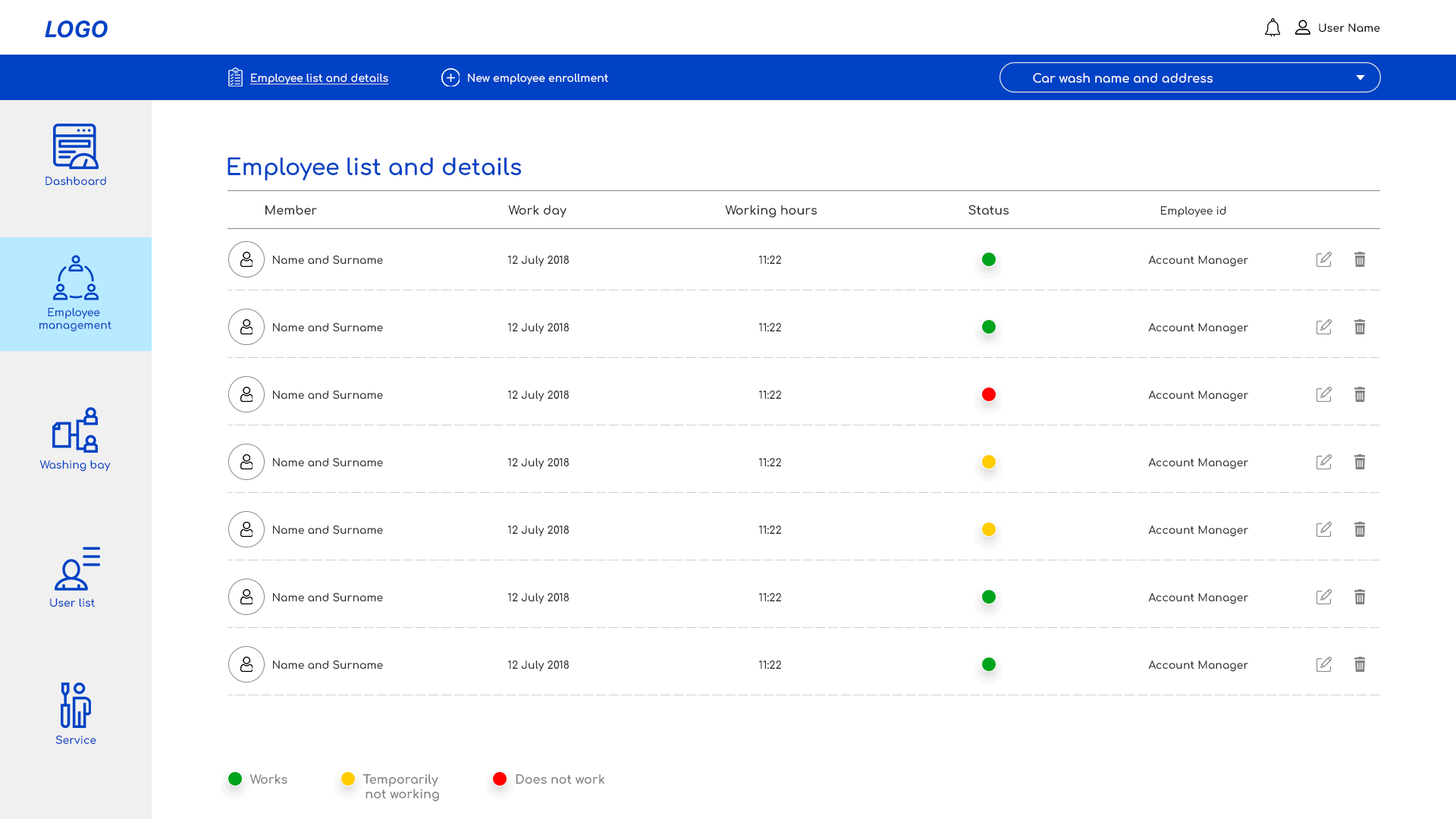
<style>
.page{position:relative;width:1456px;height:819px;background:#ffffff}
.page>*{position:absolute;margin:0}
.t1{font:22.7px "AktivGrotesk-BoldItalic";color:#0042c5}
.t2{font:10.6px "Comfortaa-Bold";color:#010101}
.t3{font:10.6px "Comfortaa-Bold";color:#ffffff;text-decoration:underline}
.t4{font:10.6px "Comfortaa-Bold";color:#ffffff}
.t5{font:12.1px "Comfortaa-Bold";color:#ffffff}
.t6{font:22.7px "Comfortaa-Bold";color:#0042c5}
.t7{font:10.6px "Comfortaa-Bold";color:#0042c5}
.t8{font:12.1px "Comfortaa-Bold";color:#303030}
.t9{font:10.6px "Comfortaa-Bold";color:#303030}
.t10{font:12.1px "Comfortaa-Bold";color:#7e7e7e}
</style>
<div class="page">
<p class="t1" style="left:45px;top:20px;width:63px;height:18px">LOGO</p>
<p class="t2" style="left:1319px;top:24px;width:61px;height:9px">User Name</p>
<p class="t3" style="left:249px;top:74px;width:140px;height:11px">Employee list and details</p>
<p class="t4" style="left:468px;top:74px;width:140px;height:11px">New employee enrollment</p>
<p class="t5" style="left:1033px;top:73px;width:180px;height:10px">Car wash name and address</p>
<p class="t6" style="left:227px;top:157px;width:294px;height:23px">Employee list and details</p>
<p class="t7" style="left:45px;top:177px;width:61px;height:8px">Dashboard</p>
<p class="t8" style="left:265px;top:205px;width:52px;height:10px">Member</p>
<p class="t8" style="left:508px;top:205px;width:58px;height:13px">Work day</p>
<p class="t8" style="left:725px;top:205px;width:92px;height:13px">Working hours</p>
<p class="t8" style="left:968px;top:205px;width:41px;height:10px">Status</p>
<p class="t9" style="left:1161px;top:206px;width:65px;height:12px">Employee id</p>
<p class="t9" style="left:273px;top:255px;width:110px;height:10px">Name and Surname</p>
<p class="t9" style="left:508px;top:255px;width:61px;height:12px">12 July 2018</p>
<p class="t9" style="left:759px;top:256px;width:22px;height:9px">11:22</p>
<p class="t9" style="left:1148px;top:256px;width:100px;height:11px">Account Manager</p>
<p class="t7" style="left:39px;top:308px;width:72px;height:23px;text-align:center">Employee <br>management</p>
<p class="t9" style="left:273px;top:322px;width:110px;height:10px">Name and Surname</p>
<p class="t9" style="left:508px;top:322px;width:61px;height:12px">12 July 2018</p>
<p class="t9" style="left:759px;top:323px;width:22px;height:9px">11:22</p>
<p class="t9" style="left:1148px;top:323px;width:100px;height:11px">Account Manager</p>
<p class="t9" style="left:273px;top:390px;width:110px;height:10px">Name and Surname</p>
<p class="t9" style="left:508px;top:390px;width:61px;height:12px">12 July 2018</p>
<p class="t9" style="left:759px;top:391px;width:22px;height:9px">11:22</p>
<p class="t9" style="left:1148px;top:391px;width:100px;height:11px">Account Manager</p>
<p class="t7" style="left:39px;top:460px;width:72px;height:12px">Washing bay</p>
<p class="t9" style="left:273px;top:457px;width:110px;height:10px">Name and Surname</p>
<p class="t9" style="left:508px;top:457px;width:61px;height:12px">12 July 2018</p>
<p class="t9" style="left:759px;top:458px;width:22px;height:9px">11:22</p>
<p class="t9" style="left:1148px;top:458px;width:100px;height:11px">Account Manager</p>
<p class="t9" style="left:273px;top:525px;width:110px;height:10px">Name and Surname</p>
<p class="t9" style="left:508px;top:525px;width:61px;height:12px">12 July 2018</p>
<p class="t9" style="left:759px;top:526px;width:22px;height:9px">11:22</p>
<p class="t9" style="left:1148px;top:526px;width:100px;height:11px">Account Manager</p>
<p class="t9" style="left:273px;top:592px;width:110px;height:10px">Name and Surname</p>
<p class="t9" style="left:508px;top:592px;width:61px;height:12px">12 July 2018</p>
<p class="t9" style="left:759px;top:593px;width:22px;height:9px">11:22</p>
<p class="t9" style="left:1148px;top:593px;width:100px;height:11px">Account Manager</p>
<p class="t7" style="left:50px;top:598px;width:45px;height:9px">User list</p>
<p class="t9" style="left:273px;top:660px;width:110px;height:10px">Name and Surname</p>
<p class="t9" style="left:508px;top:660px;width:61px;height:12px">12 July 2018</p>
<p class="t9" style="left:759px;top:660px;width:22px;height:10px">11:22</p>
<p class="t9" style="left:1148px;top:660px;width:100px;height:12px">Account Manager</p>
<p class="t7" style="left:55px;top:735px;width:41px;height:10px">Service</p>
<p class="t10" style="left:250px;top:774px;width:37px;height:10px">Works</p>
<p class="t10" style="left:362px;top:774px;width:77px;height:28px;text-align:center">Temporarily <br>not working</p>
<p class="t10" style="left:516px;top:774px;width:88px;height:10px">Does not work</p>
</div>
